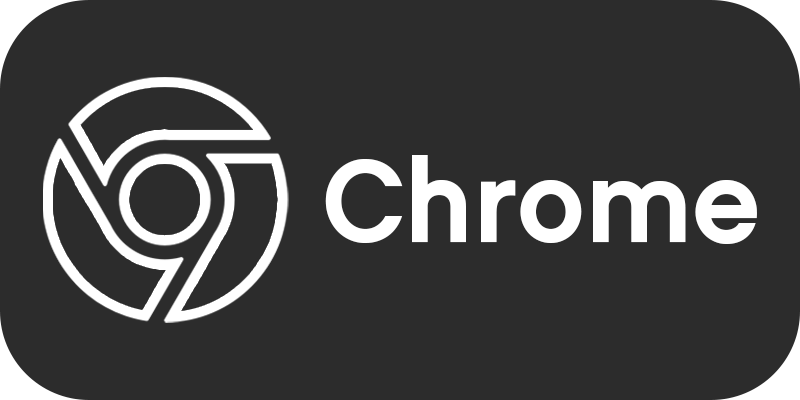
<style>
.page{position:relative;width:800px;height:400px;background:#2c2c2c}
.page>*{position:absolute;margin:0}
.t1{font:117.4px "Chalet-NewYorkNineteenSixty";letter-spacing:0.005em;color:#ffffff}
</style>
<div class="page">
<p class="t1" style="left:325px;top:155px;width:432px;height:89px">Chrome</p>
</div>
